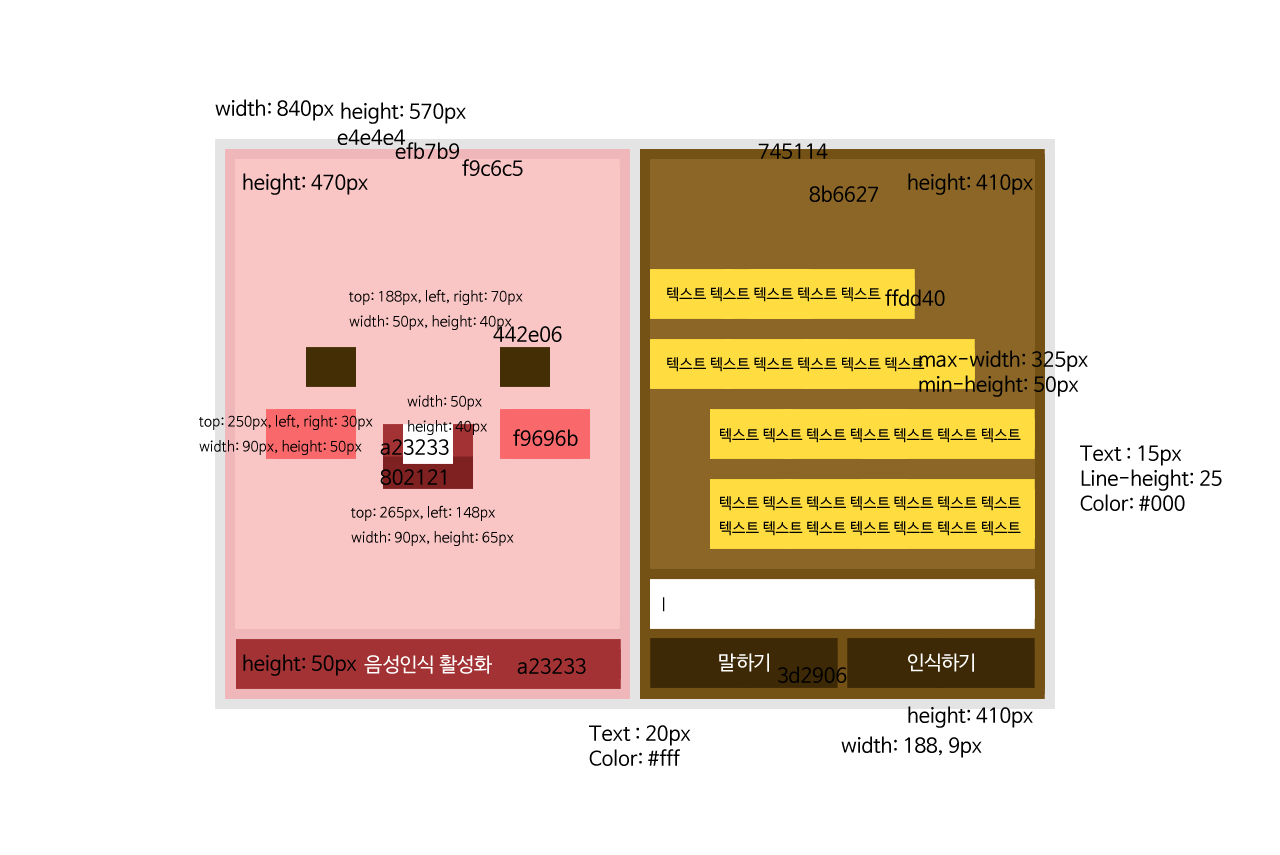
<style>
.page{position:relative;width:1280px;height:855px;background:#ffffff}
.page>*{position:absolute;margin:0}
.t1{font:20px "NanumBarunGothic";color:#000000}
.t2{font:14px/25px "NanumBarunGothic";color:#000000}
.t3{font:20px/25px "NanumBarunGothic";color:#000000}
</style>
<div class="page">
<p class="t1" style="left:215px;top:99px;width:119px;height:22px">width: 840px</p>
<p class="t1" style="left:341px;top:102px;width:125px;height:22px">height: 570px</p>
<p class="t1" style="left:337px;top:129px;width:68px;height:16px">e4e4e4</p>
<p class="t1" style="left:395px;top:142px;width:64px;height:17px">efb7b9</p>
<p class="t1" style="left:758px;top:143px;width:70px;height:16px">745114</p>
<p class="t1" style="left:462px;top:159px;width:61px;height:17px">f9c6c5</p>
<p class="t1" style="left:243px;top:173px;width:125px;height:22px">height: 470px</p>
<p class="t1" style="left:908px;top:173px;width:125px;height:22px">height: 410px</p>
<p class="t1" style="left:809px;top:185px;width:69px;height:17px">8b6627</p>
<p class="t2" style="left:349px;top:289px;width:174px;height:41px">top: 188px, left, right: 70px<br>width: 50px, height: 40px</p>
<p class="t1" style="left:885px;top:289px;width:60px;height:17px">ffdd40</p>
<p class="t1" style="left:493px;top:326px;width:69px;height:16px">442e06</p>
<p class="t3" style="left:919px;top:350px;width:169px;height:47px">max-width: 325px<br>min-height: 50px</p>
<p class="t2" style="left:407px;top:395px;width:80px;height:40px">width: 50px<br>height: 40px</p>
<p class="t2" style="left:199px;top:414px;width:174px;height:41px">top: 250px, left, right: 30px<br>width: 90px, height: 50px</p>
<p class="t1" style="left:513px;top:429px;width:65px;height:17px">f9696b</p>
<p class="t1" style="left:380px;top:439px;width:69px;height:16px">a23233</p>
<p class="t3" style="left:1080px;top:445px;width:142px;height:66px">Text : 15px<br>Line-height: 25<br>Color: #000</p>
<p class="t1" style="left:380px;top:469px;width:66px;height:16px">802121</p>
<p class="t2" style="left:351px;top:505px;width:163px;height:41px">top: 265px, left: 148px<br>width: 90px, height: 65px</p>
<p class="t1" style="left:243px;top:654px;width:114px;height:22px">height: 50px</p>
<p class="t1" style="left:517px;top:658px;width:69px;height:16px">a23233</p>
<p class="t1" style="left:778px;top:666px;width:69px;height:17px">3d2906</p>
<p class="t1" style="left:908px;top:706px;width:125px;height:22px">height: 410px</p>
<p class="t3" style="left:589px;top:725px;width:102px;height:41px">Text : 20px<br>Color: #fff</p>
<p class="t1" style="left:841px;top:736px;width:141px;height:22px">width: 188, 9px</p>
</div>
